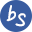
<style>
.page{position:relative;width:32px;height:32px;background:#385ca0}
.page>*{position:absolute;margin:0}
.t1{font:30px "NanumPen";color:#ffffff}
</style>
<div class="page">
<p class="t1" style="left:6px;top:5px;width:20px;height:22px;rotate:15deg">bs</p>
</div>
